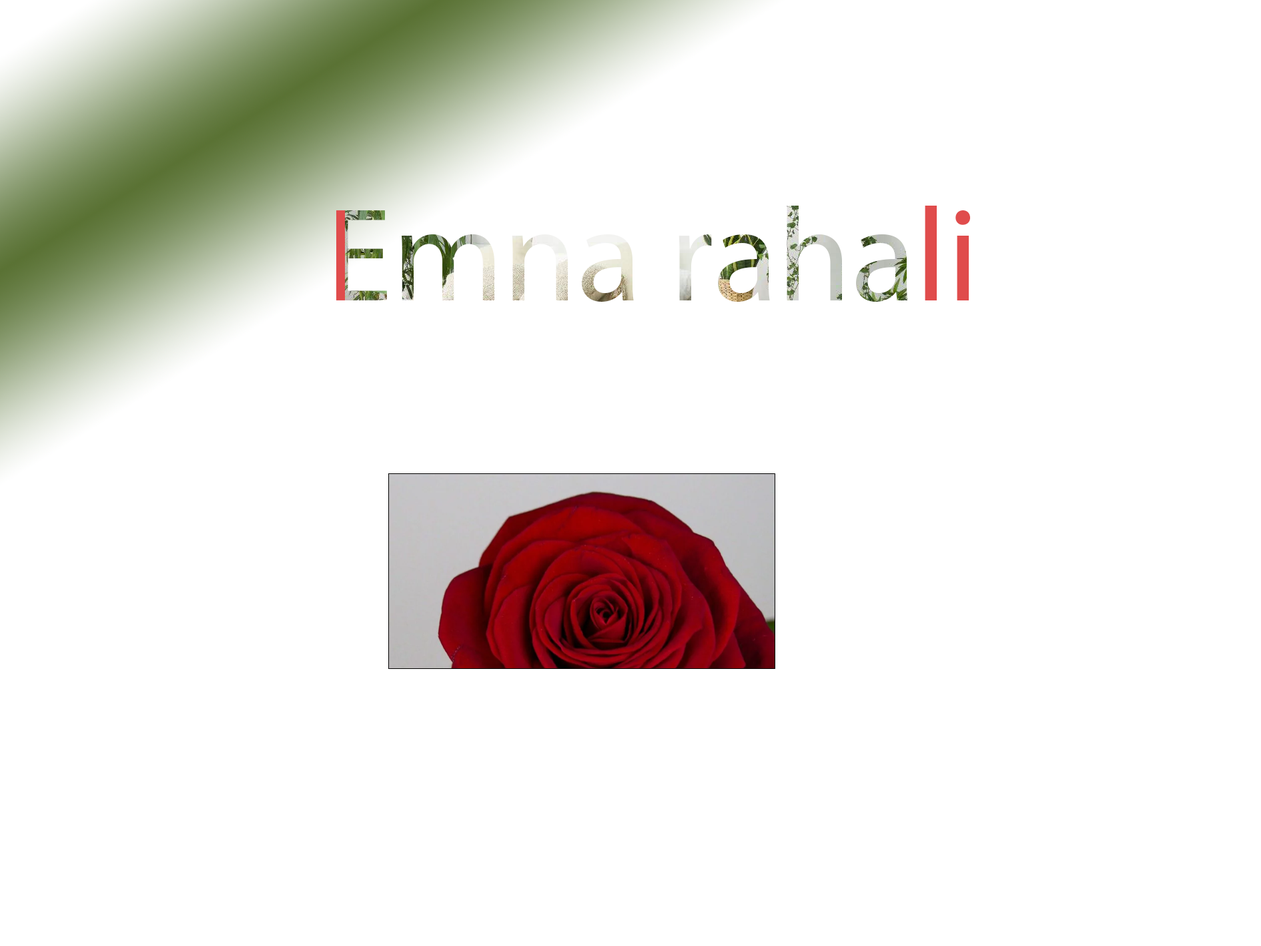
<style>
.page{position:relative;width:1261px;height:946px;background:#ffffff}
.page>*{position:absolute;margin:0}
.t1{font:133.5px "MyriadPro-Regular"}
.t2{font:33.4px "MyriadPro-Regular"}
</style>
<div class="page">
<p class="t1" style="left:336px;top:206px;width:634px;height:96px"><span class="t2">                                </span>Emna rahali</p>
</div>
